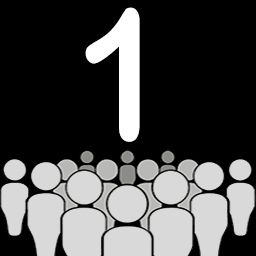
<style>
.page{position:relative;width:256px;height:256px;background:#000000}
.page>*{position:absolute;margin:0}
.t1{font:182.4px "ArialRoundedMTBold";letter-spacing:-0.4em;color:#ffffff;font-variant:small-caps;scale:0.83 1}
</style>
<div class="page">
<p class="t1" style="left:85px;top:7px;width:55px;height:135px">1</p>
</div>
